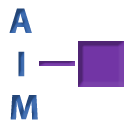
<style>
.page{position:relative;width:128px;height:128px;background:#ffffff}
.page>*{position:absolute;margin:0}
.t1{font:36px "MyriadPro-Bold";color:#3565ac}
</style>
<div class="page">
<p class="t1" style="left:9px;top:8px;width:29px;height:112px">A<br> I<br>M</p>
</div>
